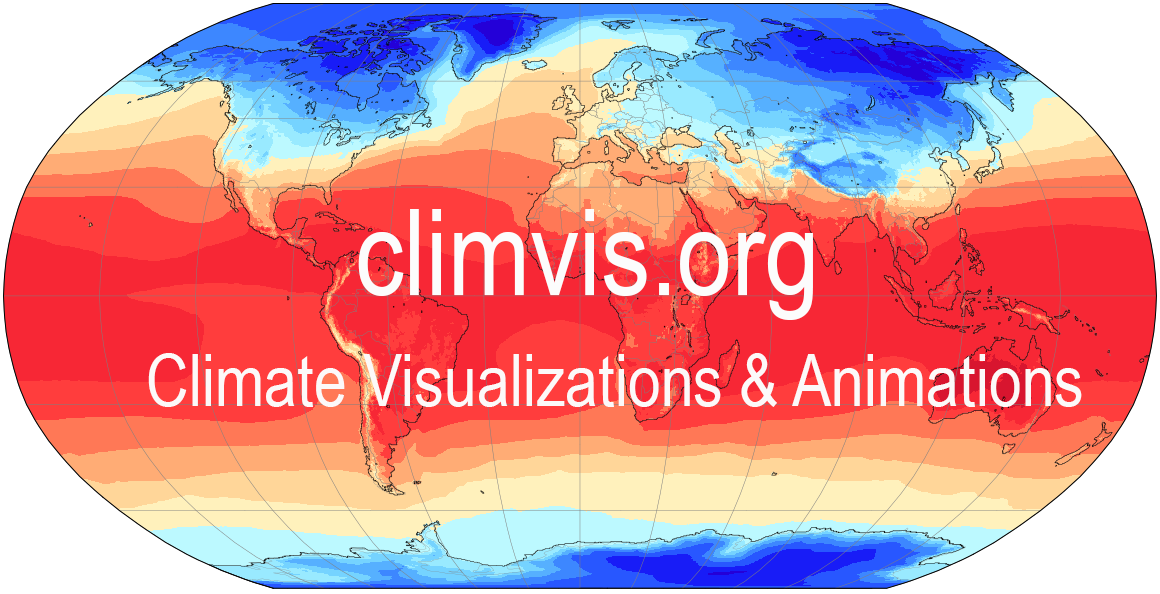
<style>
.page{position:relative;width:1160px;height:594px}
.page>*{position:absolute;margin:0}
.t1{font:120px "ArialNarrow";color:#fcfcfc}
.t2{font:72px "ArialNarrow";color:#fcf9f9}
</style>
<div class="page">
<p class="t1" style="left:358px;top:209px;width:455px;height:111px">climvis.org</p>
<p class="t2" style="left:148px;top:353px;width:934px;height:54px">Climate Visualizations &amp; Animations</p>
</div>
